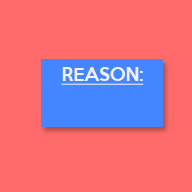
<style>
.page{position:relative;width:192px;height:192px;background:#ff6a6a}
.page>*{position:absolute;margin:0}
.t1{font:16.7px "KeepCalm-Medium";color:#f1f1f1;text-decoration:underline}
.t2{font:17.1px "KeepCalm-Medium";color:#f1f1f1;text-decoration:underline}
</style>
<div class="page">
<p class="t1" style="left:61px;top:67px;width:83px;height:18px">R<span class="t2">E</span>ASON:</p>
</div>
